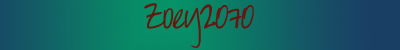
<style>
.page{position:relative;width:400px;height:50px}
.page>*{position:absolute;margin:0}
.t1{font:34px "ThrowMyHandsUpintheAir";letter-spacing:-0.056em;color:#671610}
</style>
<div class="page">
<p class="t1" style="left:144px;top:3px;width:110px;height:45px">Zoey2070</p>
</div>
